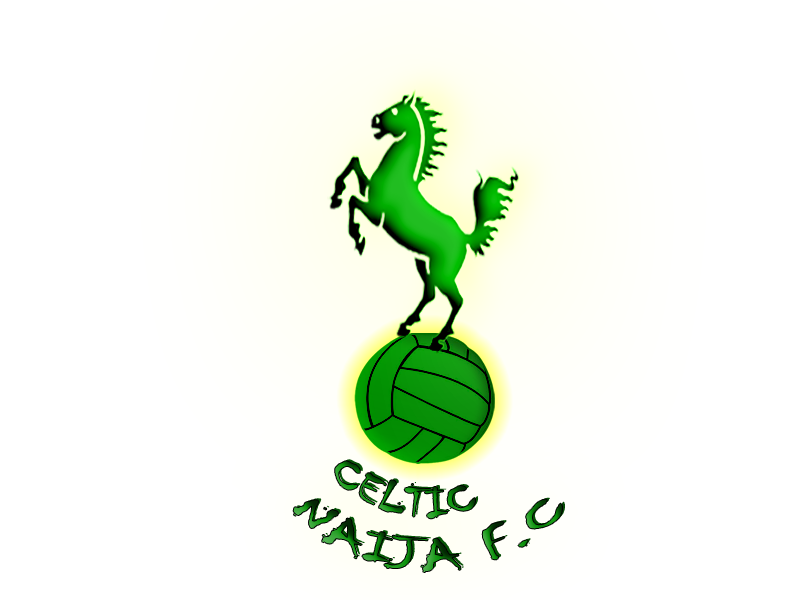
<style>
.page{position:relative;width:800px;height:600px;background:#ffffff}
.page>*{position:absolute;margin:0}
.t1{font:43.1px "Chiller-Regular"}
</style>
<div class="page">
<p class="t1" style="left:293px;top:461px;width:269px;height:111px">CELTIC <br>NAIJA F.C</p>
</div>
